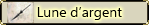
<style>
.page{position:relative;width:149px;height:25px;background:#d9d5bd}
.page>*{position:absolute;margin:0}
.t1{font:14px "LaoUI";color:#000000}
</style>
<div class="page">
<p class="t1" style="left:37px;top:7px;width:85px;height:13px">Lune d’argent</p>
</div>
